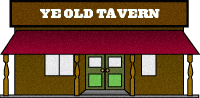
<style>
.page{position:relative;width:200px;height:98px}
.page>*{position:absolute;margin:0}
.t1{font:12px "AcropolisHTF-Black";color:#f8fffd}
</style>
<div class="page">
<p class="t1" style="left:40px;top:8px;width:120px;height:10px">YE OLD TAVERN</p>
</div>
